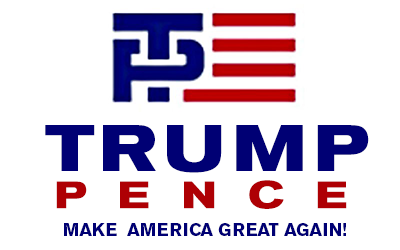
<style>
.page{position:relative;width:400px;height:250px;background:#ffffff}
.page>*{position:absolute;margin:0}
.t1{font:65px "AkzidenzGroteskBE-BoldEx";letter-spacing:0.065em;color:#000073}
.t2{font:38px "AkzidenzGroteskBE-BoldEx";letter-spacing:0.811em;color:#ae0004}
.t3{font:18px "AkzidenzGroteskBE-Bold";color:#000074}
</style>
<div class="page">
<p class="t1" style="left:45px;top:125px;width:324px;height:48px">TRUMP</p>
<p class="t2" style="left:56px;top:180px;width:291px;height:29px">PENCE</p>
<p class="t3" style="left:64px;top:223px;width:282px;height:13px">MAKE  AMERICA GREAT AGAIN!</p>
</div>
